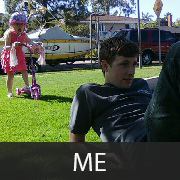
<style>
.page{position:relative;width:180px;height:180px}
.page>*{position:absolute;margin:0}
.t1{font:26.7px "MyriadPro-Regular";color:#faf7f7}
</style>
<div class="page">
<p class="t1" style="left:73px;top:153px;width:33px;height:18px">ME</p>
</div>
